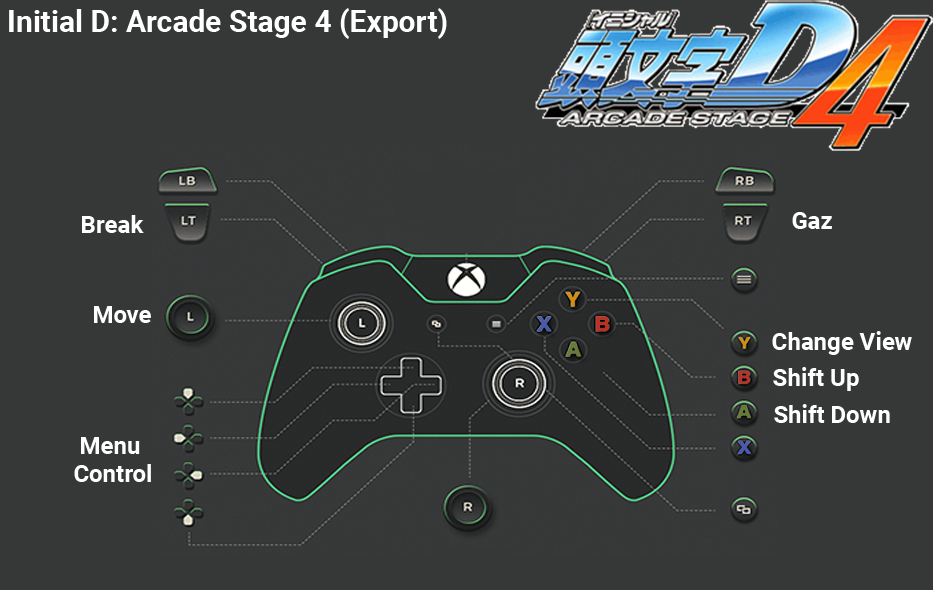
<style>
.page{position:relative;width:933px;height:590px;background:#363838}
.page>*{position:absolute;margin:0}
.t1{font:30px "Roboto-Bold";color:#ffffff}
.t2{font:24px "Roboto-Bold";color:#ffffff}
.t3{font:24px/28px "Roboto-Bold";color:#ffffff}
</style>
<div class="page">
<p class="t1" style="left:9px;top:8px;width:438px;height:31px">Initial D: Arcade Stage 4 (Export)</p>
<p class="t2" style="left:82px;top:215px;width:62px;height:18px">Break</p>
<p class="t2" style="left:792px;top:212px;width:40px;height:17px">Gaz</p>
<p class="t2" style="left:94px;top:306px;width:57px;height:17px">Move</p>
<p class="t2" style="left:772px;top:331px;width:140px;height:24px">Change View</p>
<p class="t2" style="left:773px;top:367px;width:86px;height:24px">Shift Up</p>
<p class="t2" style="left:774px;top:404px;width:116px;height:19px">Shift Down</p>
<p class="t3" style="left:74px;top:437px;width:77px;height:45px;text-align:center">Menu <br>Control</p>
</div>
